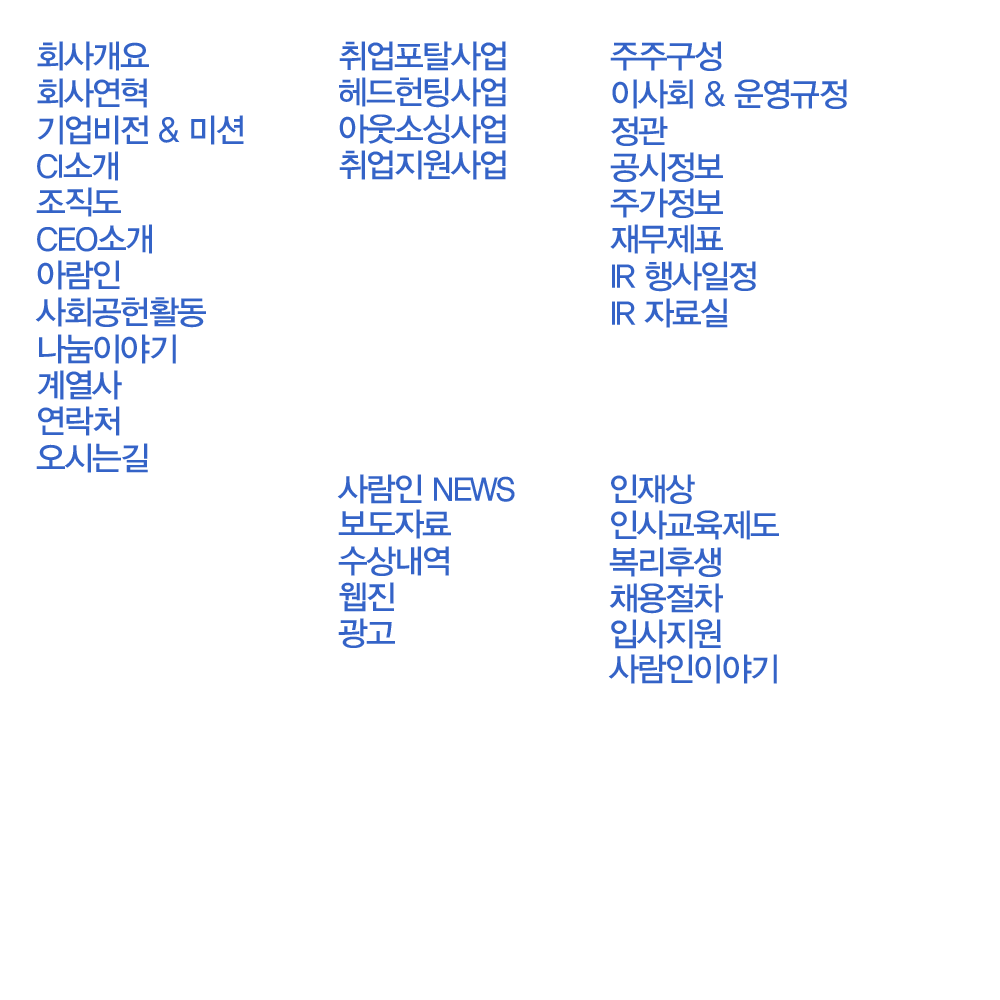
<style>
.page{position:relative;width:1000px;height:1000px;background:#ffffff}
.page>*{position:absolute;margin:0}
.t1{font:33px "YDIYGO330";letter-spacing:-0.05em;color:#3463c7}
.t2{font:33px "YDIYGO330";letter-spacing:-0.05em;color:#3463c7;text-transform:uppercase}
</style>
<div class="page">
<p class="t1" style="left:37px;top:41px;width:112px;height:30px">회사개요</p>
<p class="t1" style="left:339px;top:41px;width:167px;height:30px">취업포탈사업</p>
<p class="t1" style="left:610px;top:41px;width:112px;height:30px">주주구성</p>
<p class="t1" style="left:37px;top:78px;width:110px;height:30px">회사연혁</p>
<p class="t1" style="left:339px;top:77px;width:167px;height:31px">헤드헌팅사업</p>
<p class="t1" style="left:612px;top:79px;width:235px;height:30px">이사회 &amp; 운영규정</p>
<p class="t1" style="left:37px;top:115px;width:207px;height:30px">기업비전 &amp; 미션</p>
<p class="t1" style="left:339px;top:114px;width:167px;height:30px">아웃소싱사업</p>
<p class="t1" style="left:611px;top:116px;width:57px;height:30px">정관</p>
<p class="t1" style="left:339px;top:150px;width:167px;height:30px">취업지원사업</p>
<p class="t1" style="left:37px;top:151px;width:81px;height:30px">CI소개</p>
<p class="t1" style="left:610px;top:152px;width:113px;height:30px">공시정보</p>
<p class="t1" style="left:36px;top:187px;width:85px;height:30px">조직도</p>
<p class="t1" style="left:610px;top:188px;width:113px;height:30px">주가정보</p>
<p class="t1" style="left:37px;top:224px;width:115px;height:30px">CEO<span class="t2">소개</span></p>
<p class="t1" style="left:610px;top:224px;width:113px;height:30px">재무제표</p>
<p class="t1" style="left:37px;top:260px;width:83px;height:30px">아람인</p>
<p class="t1" style="left:612px;top:261px;width:144px;height:31px">IR 행사일정</p>
<p class="t1" style="left:35px;top:297px;width:171px;height:31px">사회공헌활동</p>
<p class="t1" style="left:612px;top:298px;width:116px;height:30px">IR 자료실</p>
<p class="t1" style="left:39px;top:334px;width:137px;height:30px">나눔이야기</p>
<p class="t1" style="left:37px;top:370px;width:85px;height:30px">계열사</p>
<p class="t1" style="left:38px;top:406px;width:82px;height:30px">연락처</p>
<p class="t1" style="left:36px;top:443px;width:112px;height:30px">오시는길</p>
<p class="t1" style="left:337px;top:474px;width:178px;height:30px">사람인 NEWS</p>
<p class="t1" style="left:611px;top:474px;width:84px;height:30px">인재상</p>
<p class="t1" style="left:338px;top:509px;width:113px;height:30px">보도자료</p>
<p class="t1" style="left:611px;top:510px;width:168px;height:30px">인사교육제도</p>
<p class="t1" style="left:338px;top:546px;width:111px;height:30px">수상내역</p>
<p class="t1" style="left:609px;top:547px;width:112px;height:30px">복리후생</p>
<p class="t1" style="left:339px;top:582px;width:55px;height:30px">웹진</p>
<p class="t1" style="left:609px;top:583px;width:114px;height:31px">채용절차</p>
<p class="t1" style="left:338px;top:618px;width:57px;height:30px">광고</p>
<p class="t1" style="left:611px;top:619px;width:110px;height:30px">입사지원</p>
<p class="t1" style="left:608px;top:654px;width:169px;height:30px">사람인이야기</p>
</div>
